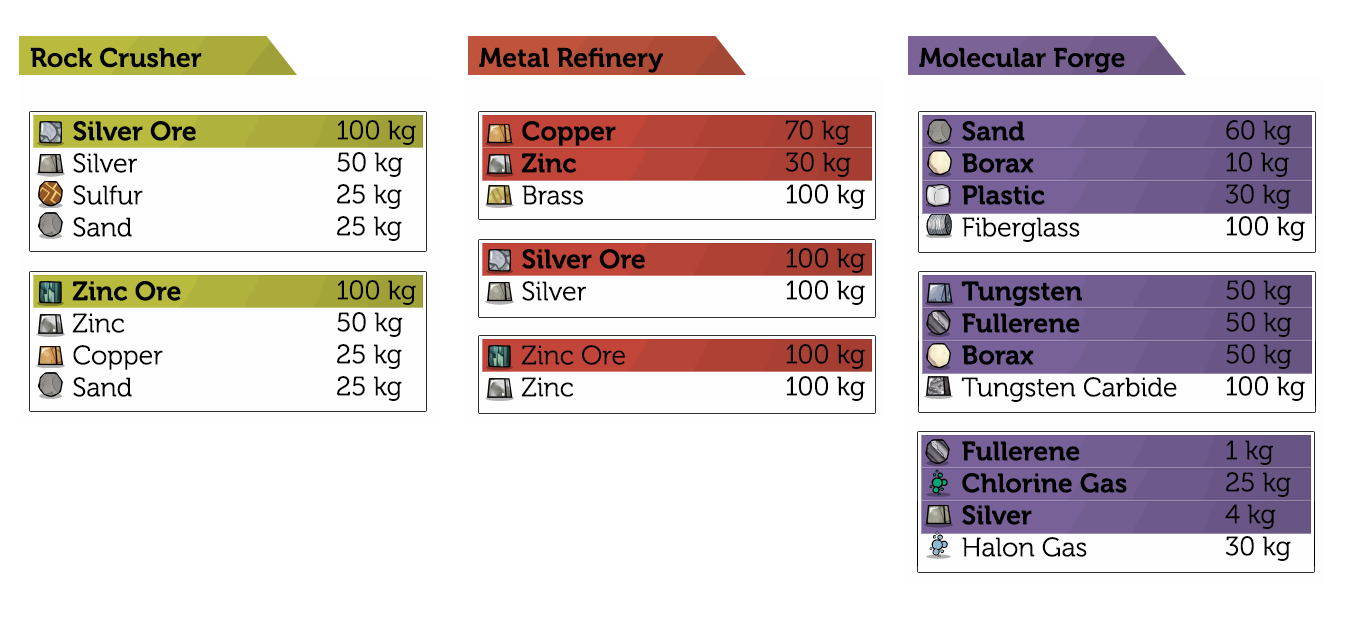
<style>
.page{position:relative;width:1355px;height:640px;background:#ffffff}
.page>*{position:absolute;margin:0}
.t1{font:26.7px "Museo-700";color:#000000}
.t2{font:26.7px "Museo-300";color:#000000}
</style>
<div class="page">
<p class="t1" style="left:30px;top:47px;width:172px;height:21px">Rock Crusher</p>
<p class="t1" style="left:479px;top:47px;width:184px;height:26px">Metal Refinery</p>
<p class="t1" style="left:919px;top:47px;width:206px;height:26px">Molecular Forge</p>
<p class="t2" style="left:72px;top:121px;width:124px;height:276px"><span class="t1">Silver Ore<br></span>Silver<br>Sulfur<br>Sand<br><br><span class="t1">Zinc Ore<br></span>Zinc<br>Copper<br>Sand</p>
<p class="t2" style="left:337px;top:120px;width:79px;height:281px">100 kg<br>50 kg<br>25 kg<br>25 kg<br><br>100 kg<br>50 kg<br>25 kg<br>25 kg</p>
<p class="t2" style="left:521px;top:121px;width:124px;height:276px"><span class="t1">Copper<br>Zinc<br></span>Brass<br><br><span class="t1">Silver Ore<br></span>Silver<br><br>Zinc Ore<br>Zinc</p>
<p class="t2" style="left:785px;top:120px;width:80px;height:281px">70 kg<br>30 kg<br>100 kg<br><br>100 kg<br>100 kg<br><br>100 kg<br>100 kg</p>
<p class="t1" style="left:961px;top:121px;width:216px;height:436px">Sand<br>Borax<br>Plastic<br><span class="t2">Fiberglass<br><br></span>Tungsten<br>Fullerene<br>Borax<br><span class="t2">Tungsten Carbide<br></span><br>Fullerene<br>Chlorine Gas<br>Silver<br><span class="t2">Halon Gas</span></p>
<p class="t2" style="left:1225px;top:120px;width:80px;height:441px">60 kg<br>10 kg<br>30 kg<br>100 kg<br><br>50 kg<br>50 kg<br>50 kg<br>100 kg<br><br>1 kg<br>25 kg<br>4 kg<br>30 kg</p>
</div>
